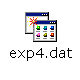
<style>
.page{position:relative;width:80px;height:80px;background:#ffffff}
.page>*{position:absolute;margin:0}
.t1{font:14px "MSReferenceSansSerif";color:#000000}
</style>
<div class="page">
<p class="t1" style="left:10px;top:47px;width:62px;height:14px">exp4.dat</p>
</div>
